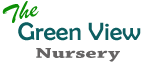
<style>
.page{position:relative;width:146px;height:66px;background:#ffffff}
.page>*{position:absolute;margin:0}
.t1{font:43.2px "BrushScriptMT";letter-spacing:-0.005em;color:#0e9007;scale:1.2 1}
.t2{font:43.2px "BerlinSansFB-Reg";letter-spacing:-0.005em;color:#0d5e61;scale:1.03 1}
.t3{font:26.4px "ChaparralPro-Bold";letter-spacing:-0.005em;color:#666464;scale:1.5 1}
</style>
<div class="page">
<p class="t1" style="left:2px;top:1px;width:37px;height:22px;rotate:-15deg">The</p>
<p class="t2" style="left:18px;top:22px;width:123px;height:19px">Green View</p>
<p class="t3" style="left:36px;top:48px;width:84px;height:14px">Nursery</p>
</div>
